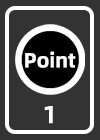
<style>
.page{position:relative;width:100px;height:140px;background:#333333}
.page>*{position:absolute;margin:0}
.t1{font:20.4px "AlibabaPuHuiTiB";color:#ffffff}
.t2{font:24.5px "AlibabaPuHuiTiB";color:#ffffff}
</style>
<div class="page">
<p class="t1" style="left:25px;top:51px;width:51px;height:17px">Point</p>
<p class="t2" style="left:44px;top:106px;width:9px;height:18px">1</p>
</div>
